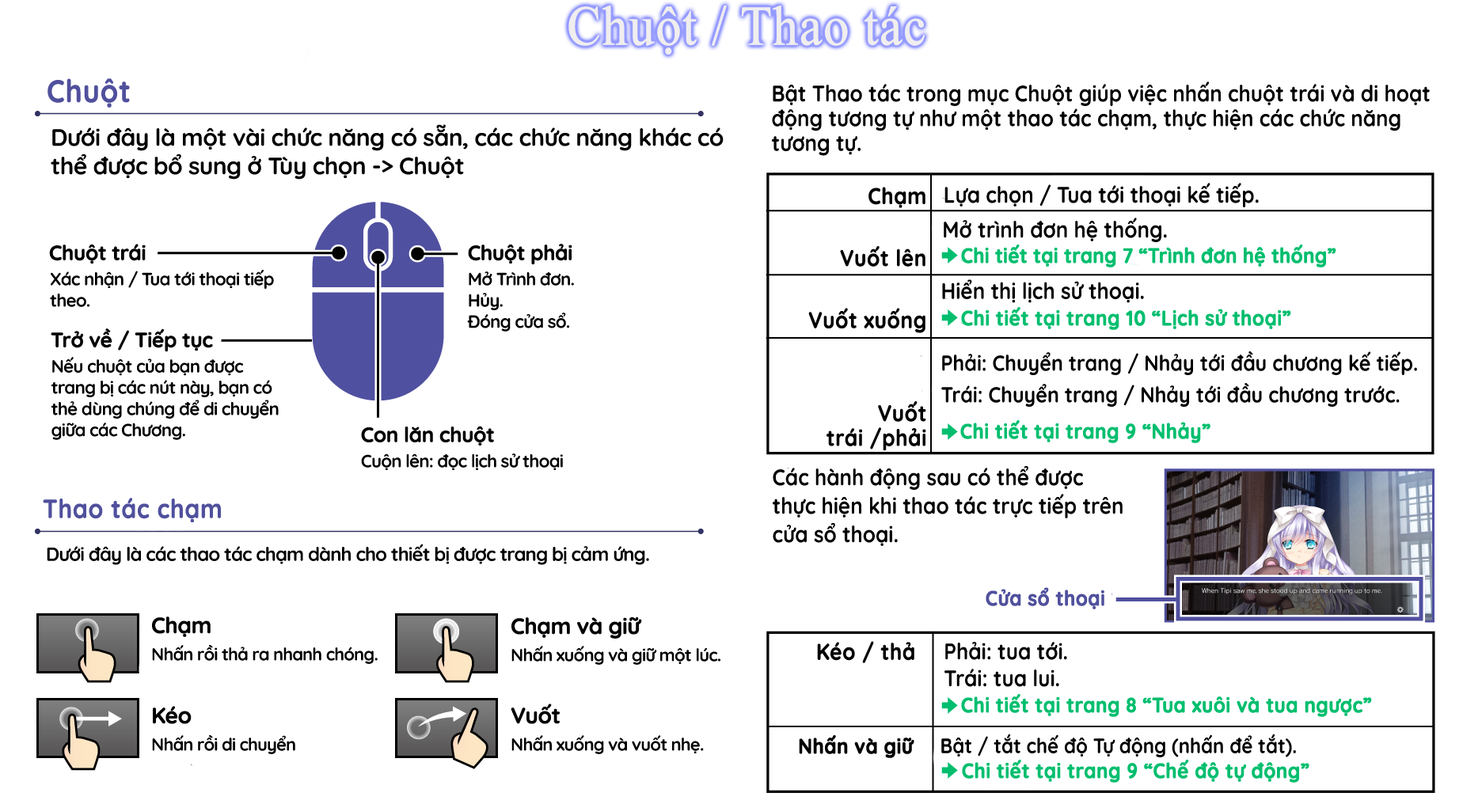
<style>
.page{position:relative;width:1482px;height:804px;background:#ffffff}
.page>*{position:absolute;margin:0}
.t1{font:55.7px "TimesNewRomanPSMT";color:#f0eeee;font-weight:bold;scale:0.91 1}
.t2{font:31.4px "Quicksand-Bold";color:#50509d;font-weight:bold;scale:0.91 1}
.t3{font:22.6px "Quicksand-Bold";color:#000000;scale:0.91 1}
.t4{font:23.8px "Quicksand-Bold";letter-spacing:-0.02em;color:#000000}
.t5{font:22.6px "Quicksand-Bold";color:#000000;font-weight:bold;scale:0.91 1}
.t6{font:20.7px "Quicksand-Bold";letter-spacing:-0.04em;color:#000000;font-weight:bold}
.t7{font:20.9px "Quicksand-Bold";letter-spacing:-0.01em;color:#00be6e;font-weight:bold;scale:0.91 1}
.t8{font:17.7px "Quicksand-Bold";letter-spacing:-0.04em;color:#000000}
.t9{font:20.9px "Quicksand-Bold";color:#00be6e;font-weight:bold;scale:0.91 1}
.t10{font:21.8px/25.3px "Quicksand-Bold";color:#000000;scale:0.91 1}
.t11{font:22.6px/28.5px "Quicksand-Bold";color:#000000;scale:0.91 1}
.t12{font:26.1px "Quicksand-Bold";color:#50509d;font-weight:bold;scale:0.91 1}
.t13{font:19px "Quicksand-Bold";letter-spacing:-0.04em;color:#000000}
.t14{font:20.9px "Quicksand-Bold";color:#50509d;font-weight:bold;scale:0.91 1}
.t15{font:17.4px "Quicksand-Bold";letter-spacing:-0.04em;color:#000000}
.t16{font:22.2px "Quicksand-Bold";letter-spacing:-0.04em;color:#000000;font-weight:bold}
.t17{font:22.6px/20.6px "Quicksand-Bold";color:#000000;scale:0.91 1}
.t18{font:20.9px "Quicksand-Bold";color:#000000;font-weight:bold;scale:0.91 1}
.t19{font:20.9px "Quicksand-Bold";color:#000000;scale:0.91 1}
</style>
<div class="page">
<p class="t1" style="left:569px;top:6px;width:356px;height:49px">Chuột / Thao tác</p>
<p class="t2" style="left:48px;top:78px;width:82px;height:30px">Chuột</p>
<p class="t3" style="left:772px;top:82px;width:658px;height:74px">Bật Thao tác trong mục Chuột giúp việc nhấn chuột trái và di hoạt động tương tự như một thao tác chạm, thực hiện các chức năng tương tự.</p>
<p class="t4" style="left:51px;top:124px;width:673px;height:56px">Dưới đây là một vài chức năng có sẵn, các chức năng khác có thể được bổ sung ở Tùy chọn -&gt; Chuột</p>
<p class="t3" style="left:945px;top:183px;width:314px;height:24px">Lựa chọn / Tua tới thoại kế tiếp.</p>
<p class="t5" style="left:808px;top:187px;width:118px;height:264px;text-align:right">Chạm<br><br>Vuốt lên<br><br>Vuốt xuống<br><br><br>Vuốt <br>trái /phải</p>
<p class="t3" style="left:944px;top:218px;width:223px;height:24px">Mở trình đơn hệ thống.</p>
<p class="t6" style="left:49px;top:244px;width:97px;height:20px">Chuột trái</p>
<p class="t6" style="left:468px;top:244px;width:104px;height:21px">Chuột phải</p>
<p class="t7" style="left:961px;top:245px;width:376px;height:23px">Chi tiết tại trang 7 “Trình đơn hệ thống”</p>
<p class="t8" style="left:50px;top:270px;width:224px;height:37px">Xác nhận / Tua tới thoại tiếp theo.</p>
<p class="t8" style="left:467px;top:272px;width:107px;height:60px">Mở Trình đơn.<br>Hủy.<br>Đóng cửa sổ.</p>
<p class="t3" style="left:942px;top:280px;width:202px;height:23px">Hiển thị lịch sử thoại.</p>
<p class="t9" style="left:961px;top:307px;width:330px;height:23px">Chi tiết tại trang 10 “Lịch sử thoại”</p>
<p class="t6" style="left:51px;top:329px;width:162px;height:23px">Trở về / Tiếp tục</p>
<p class="t10" style="left:941px;top:352px;width:476px;height:55px">Phải: Chuyển trang / Nhảy tới đầu chương kế tiếp.<br>Trái: Chuyển trang / Nhảy tới đầu chương trước.</p>
<p class="t8" style="left:51px;top:357px;width:228px;height:83px">Nếu chuột của bạn được trang bị các nút này, bạn có thẻ dùng chúng để di chuyển giữa các Chương.</p>
<p class="t6" style="left:361px;top:426px;width:133px;height:20px">Con lăn chuột</p>
<p class="t9" style="left:960px;top:420px;width:251px;height:23px">Chi tiết tại trang 9 “Nhảy”</p>
<p class="t8" style="left:361px;top:454px;width:202px;height:16px">Cuộn lên: đọc lịch sử thoại</p>
<p class="t11" style="left:773px;top:466px;width:350px;height:80px">Các hành động sau có thể được thực hiện khi thao tác trực tiếp trên cửa sổ thoại.</p>
<p class="t12" style="left:43px;top:498px;width:178px;height:25px">Thao tác chạm</p>
<p class="t13" style="left:47px;top:544px;width:602px;height:21px">Dưới đây là các thao tác chạm dành cho thiết bị được trang bị cảm ứng.</p>
<p class="t14" style="left:986px;top:588px;width:119px;height:22px">Cửa sổ thoại</p>
<p class="t15" style="left:152px;top:617px;width:226px;height:47px"><span class="t16">Chạm<br></span>Nhấn rồi thả ra nhanh chóng.</p>
<p class="t15" style="left:512px;top:617px;width:209px;height:48px"><span class="t16">Chạm và giữ<br></span>Nhấn xuống và giữ một lúc.</p>
<p class="t5" style="left:817px;top:641px;width:98px;height:23px">Kéo / thả</p>
<p class="t17" style="left:945px;top:642px;width:122px;height:45px">Phải: tua tới.<br>Trái: tua lui.</p>
<p class="t9" style="left:961px;top:694px;width:411px;height:23px">Chi tiết tại trang 8 “Tua xuôi và tua ngược”</p>
<p class="t15" style="left:152px;top:706px;width:143px;height:49px"><span class="t16">Kéo<br></span>Nhấn rồi di chuyển</p>
<p class="t15" style="left:511px;top:704px;width:193px;height:51px"><span class="t16">Vuốt<br></span>Nhấn xuống và vuốt nhẹ.</p>
<p class="t18" style="left:799px;top:736px;width:116px;height:23px">Nhấn và giữ</p>
<p class="t19" style="left:941px;top:734px;width:355px;height:24px">Bật / tắt chế độ Tự động (nhấn để tắt).</p>
<p class="t9" style="left:962px;top:760px;width:348px;height:23px">Chi tiết tại trang 9 “Chế độ tự động”</p>
</div>
